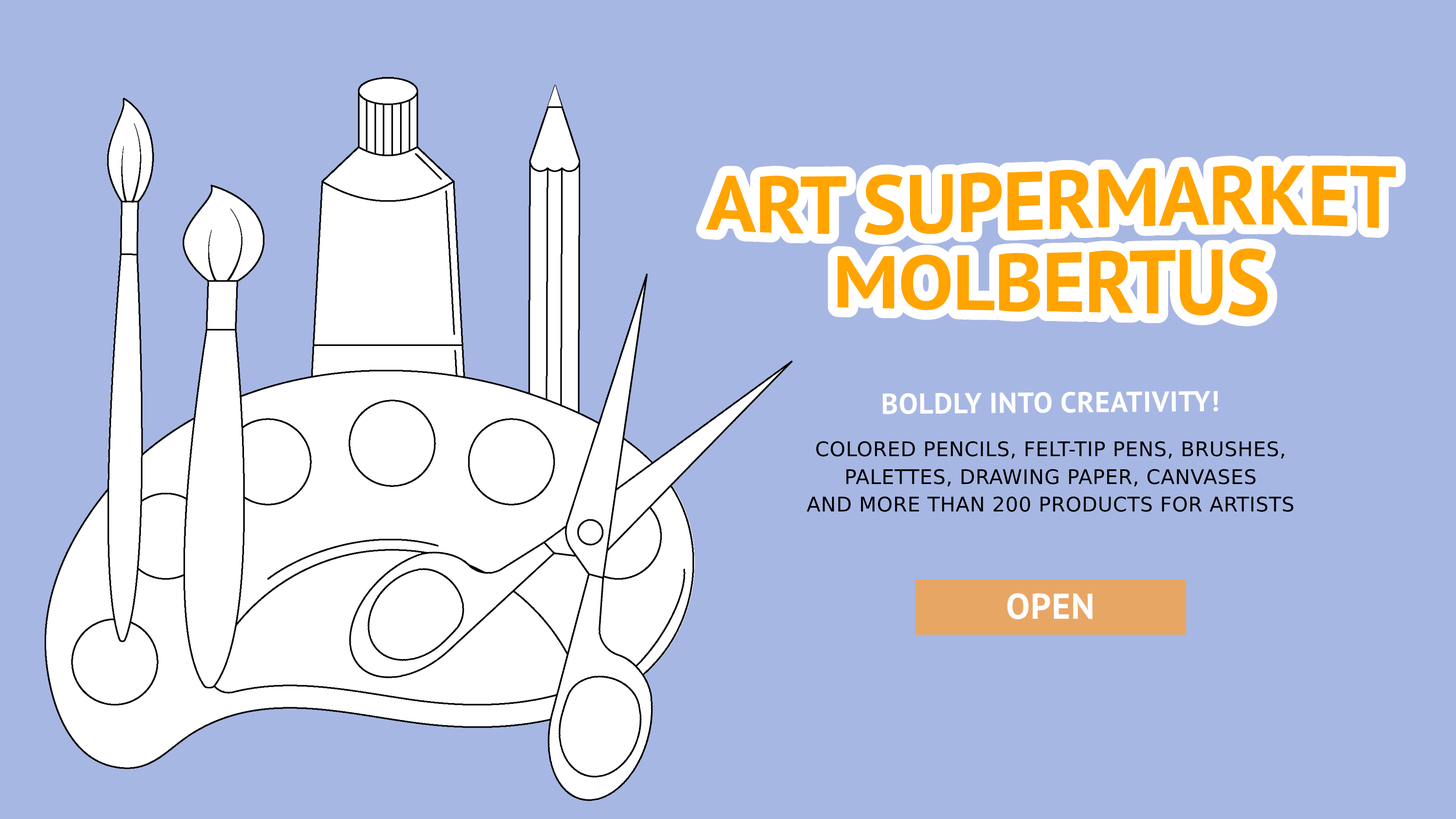
<style>
.page{position:relative;width:1456px;height:819px;background:#a7b7e3}
.page>*{position:absolute;margin:0}
.t1{font:83.3px/81.9px "MyriadPro-Bold";letter-spacing:-0.015em;color:#ffa401}
.t2{font:28.8px "MyriadPro-Bold";letter-spacing:0.02em;color:#ffffff;text-transform:uppercase}
.t3{font:20.2px/27.7px "Geometria";letter-spacing:0.02em;color:#000000;text-transform:uppercase}
.t4{font:35.8px "MyriadPro-Bold";letter-spacing:0.02em;color:#ffffff}
</style>
<div class="page">
<p class="t1" style="left:706px;top:165px;width:690px;height:152px;text-align:center">ART SUPERMARKET<br>MOLBERTUS</p>
<p class="t2" style="left:882px;top:391px;width:337px;height:23px">BOLDly INTO CREATIVITY!</p>
<p class="t3" style="left:807px;top:441px;width:487px;height:71px;text-align:center">colored pencils, felt-tip pens, brushes,<br>palettes, drawing paper, canvases<br>and more than 200 products for artists</p>
<p class="t4" style="left:1007px;top:593px;width:85px;height:27px">OPEN</p>
</div>
